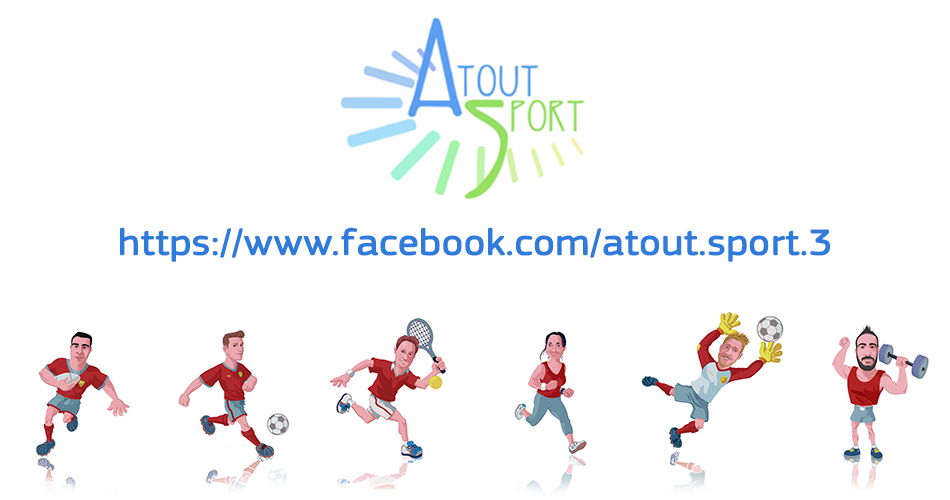
<style>
.page{position:relative;width:950px;height:500px;background:#ffffff}
.page>*{position:absolute;margin:0}
.t1{font:37.1px "ECSquareSansPro";color:#2f7bdb;font-weight:bold;scale:1.12 1}
</style>
<div class="page">
<p class="t1" style="left:120px;top:227px;width:710px;height:35px">https://www.facebook.com/atout.sport.3</p>
</div>
